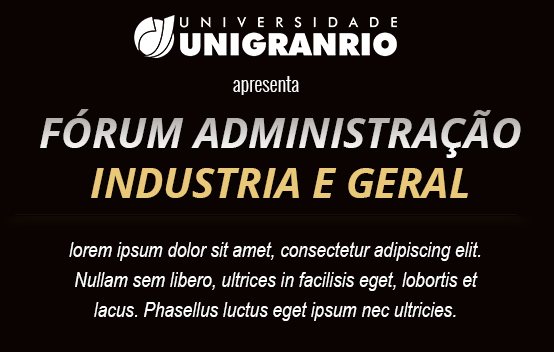
<style>
.page{position:relative;width:554px;height:352px;background:#0a0301}
.page>*{position:absolute;margin:0}
.t1{font:20px "Oswald-Light";color:#ffffff}
.t2{font:41.7px "OpenSans-BoldItalic"}
.t3{font:41.7px "OpenSans-BoldItalic";color:#eac879}
.t4{font:21px/30px "ArialNarrow-Italic";color:#ffffff}
</style>
<div class="page">
<p class="t1" style="left:233px;top:76px;width:66px;height:19px">apresenta</p>
<p class="t2" style="left:40px;top:109px;width:481px;height:49px">FÓRUM ADMINISTRAÇÃO</p>
<p class="t3" style="left:91px;top:168px;width:377px;height:30px">INDUSTRIA E GERAL</p>
<p class="t4" style="left:69px;top:242px;width:412px;height:79px;text-align:center">lorem ipsum dolor sit amet, consectetur adipiscing elit. Nullam sem libero, ultrices in facilisis eget, lobortis et lacus. Phasellus luctus eget ipsum nec ultricies.</p>
</div>
